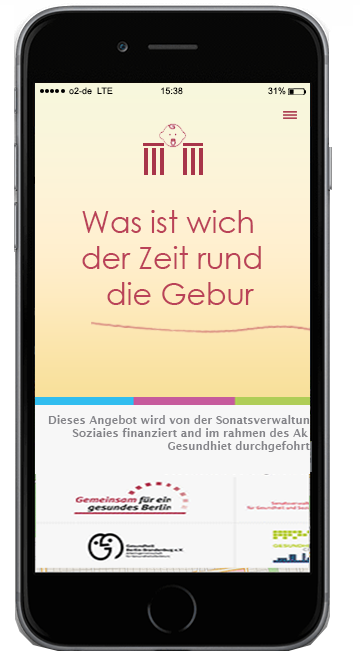
<style>
.page{position:relative;width:360px;height:660px}
.page>*{position:absolute;margin:0}
.t1{font:9px "ArialMT";color:#000000}
.t2{font:30px "CenturyGothic";color:#ba4258}
.t3{font:18px "HarlowSolid";color:#a8354a}
.t4{font:11px "LucidaSans-Demi";color:#848489}
</style>
<div class="page">
<p class="t1" style="left:69px;top:87px;width:217px;height:8px">o2-de  LTE                   15:38                                  31%</p>
<p class="t2" style="left:82px;top:210px;width:179px;height:95px"><span class="t3"><br></span>Was ist wich<br>der Zeit rund<br>   die Gebur</p>
<p class="t4" style="left:48px;top:415px;width:262px;height:37px">Dieses Angebot wird von der Sonatsverwaltun<br>         Soziaies finanziert and im rahmen des Ak<br>                                    Gesundhiet durchgefohrt</p>
</div>
